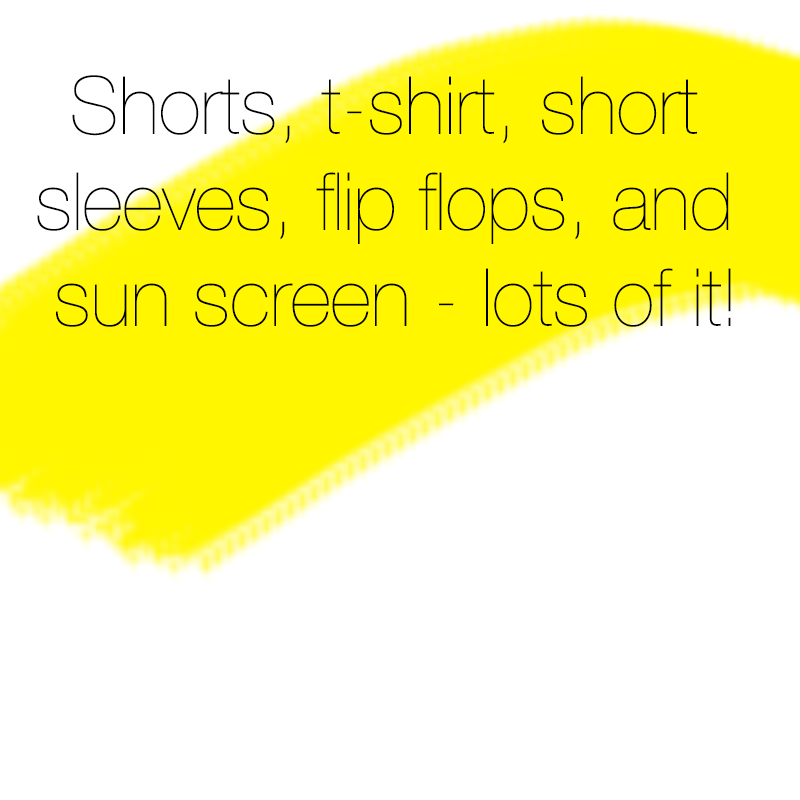
<style>
.page{position:relative;width:800px;height:800px;background:#ffffff}
.page>*{position:absolute;margin:0}
.t1{font:80px "HelveticaNeue-UltraLight";color:#000000}
</style>
<div class="page">
<p class="t1" style="left:37px;top:75px;width:694px;height:252px;text-align:center">Shorts, t-shirt, short <br>sleeves, flip flops, and <br>sun screen - lots of it!</p>
</div>
